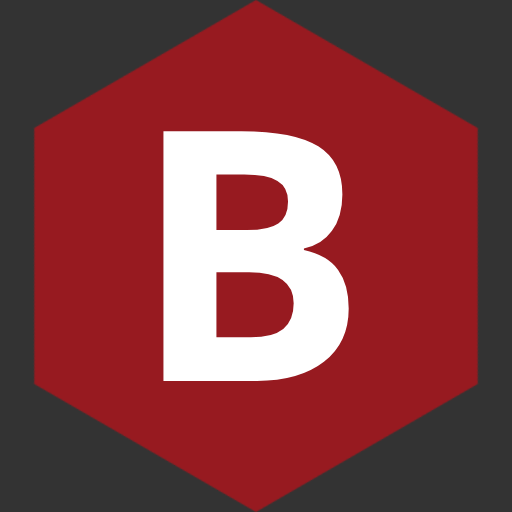
<style>
.page{position:relative;width:512px;height:512px;background:#971a20}
.page>*{position:absolute;margin:0}
.t1{font:350px "OpenSans-Bold";color:#ffffff}
</style>
<div class="page">
<p class="t1" style="left:163px;top:131px;width:186px;height:250px">B</p>
</div>
